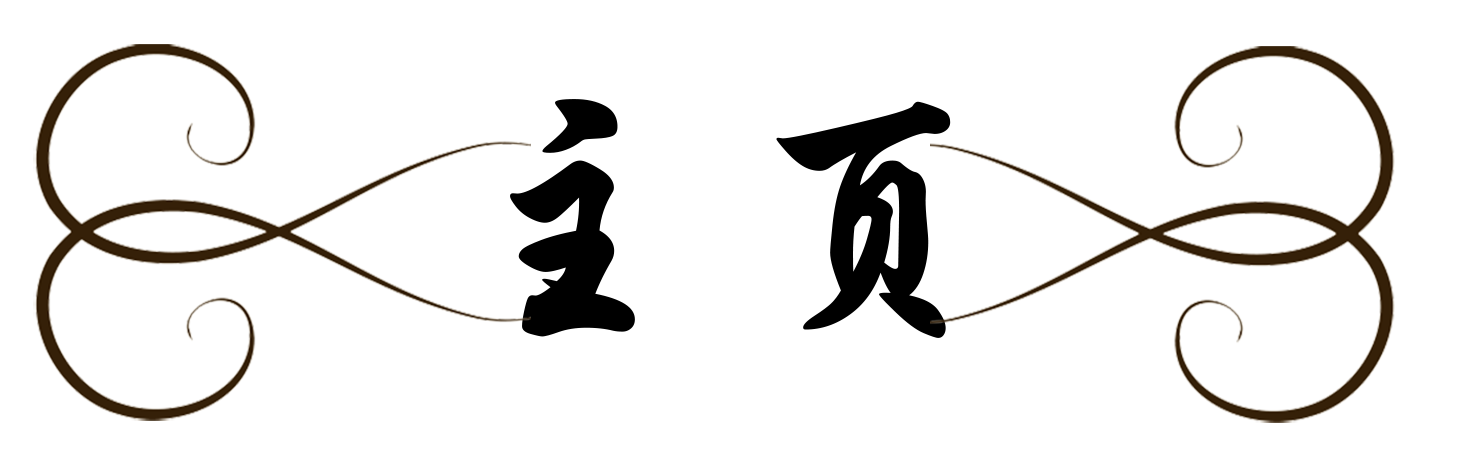
<style>
.page{position:relative;width:1467px;height:467px;background:#ffffff}
.page>*{position:absolute;margin:0}
.t1{font:300px "STXingkai";color:#000000}
</style>
<div class="page">
<p class="t1" style="left:510px;top:99px;width:441px;height:239px">主页</p>
</div>
